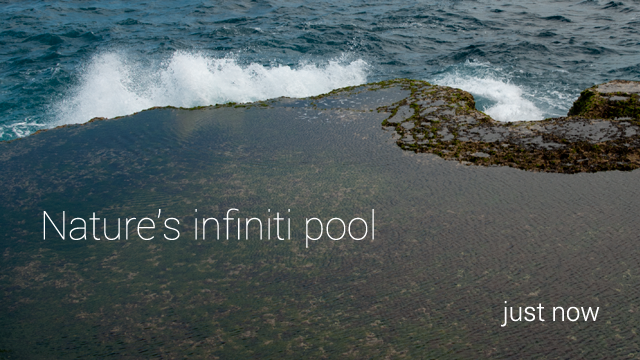
<style>
.page{position:relative;width:640px;height:360px}
.page>*{position:absolute;margin:0}
.t1{font:40px "Roboto-Thin";color:#ffffff}
.t2{font:26px "Roboto-Light";color:#ffffff}
</style>
<div class="page">
<p class="t1" style="left:43px;top:208px;width:331px;height:40px">Nature’s infiniti pool</p>
<p class="t2" style="left:501px;top:301px;width:99px;height:26px">just now</p>
</div>
